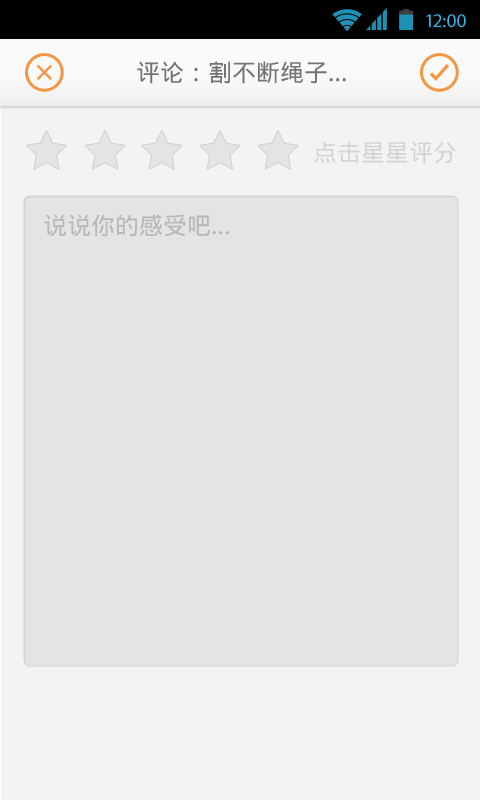
<style>
.page{position:relative;width:480px;height:800px;background:#e4e4e4}
.page>*{position:absolute;margin:0}
.t1{font:19.4px "MyriadPro-Regular";color:#33b5e5}
.t2{font:24px "DroidSansFallback";color:#737373}
.t3{font:24px "DroidSansFallback";color:#d4d4d4}
.t4{font:24px "DroidSansFallback";color:#b7b7b7}
</style>
<div class="page">
<p class="t1" style="left:426px;top:14px;width:40px;height:14px">12:00</p>
<p class="t2" style="left:137px;top:61px;width:209px;height:23px">评论：割不断绳子...</p>
<p class="t3" style="left:314px;top:141px;width:142px;height:23px">点击星星评分</p>
<p class="t4" style="left:44px;top:214px;width:185px;height:23px">说说你的感受吧...</p>
</div>
